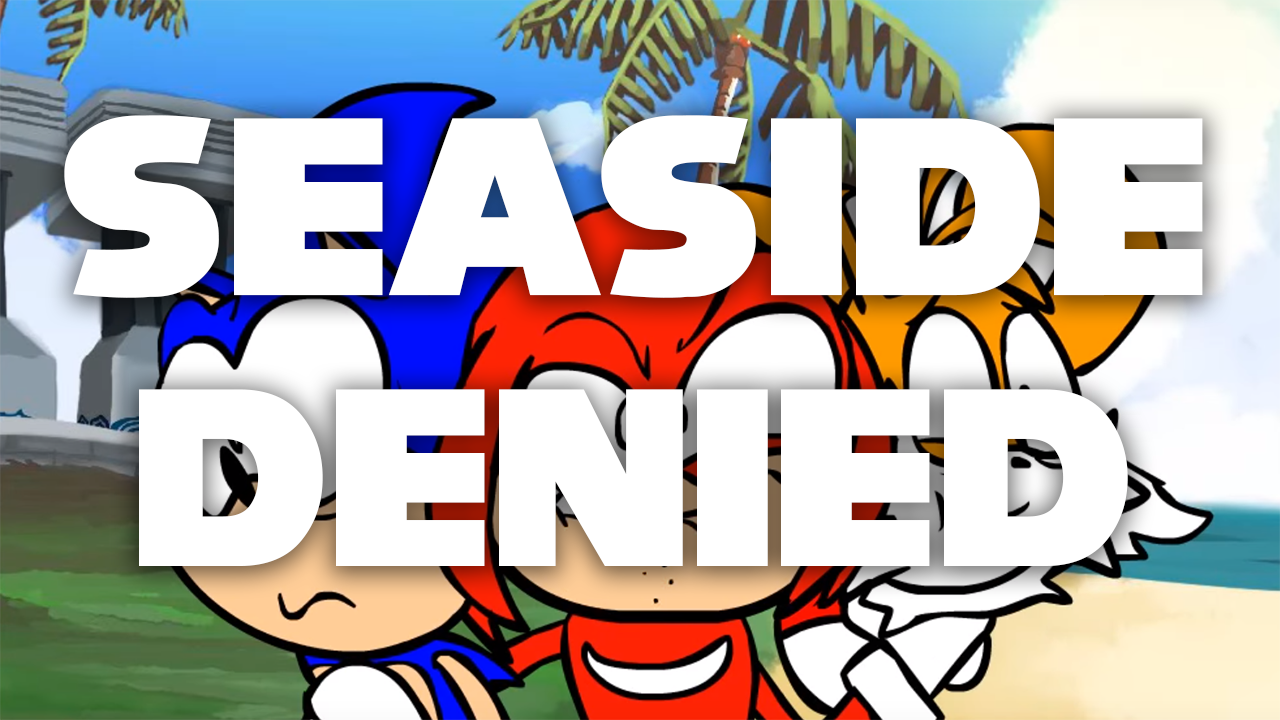
<style>
.page{position:relative;width:1280px;height:720px;background:#ffffff}
.page>*{position:absolute;margin:0}
.t1{font:226px "NiseSegaSonic";color:#ffffff}
</style>
<div class="page">
<p class="t1" style="left:64px;top:115px;width:1139px;height:451px;text-align:center">Seaside<br>denied</p>
</div>
